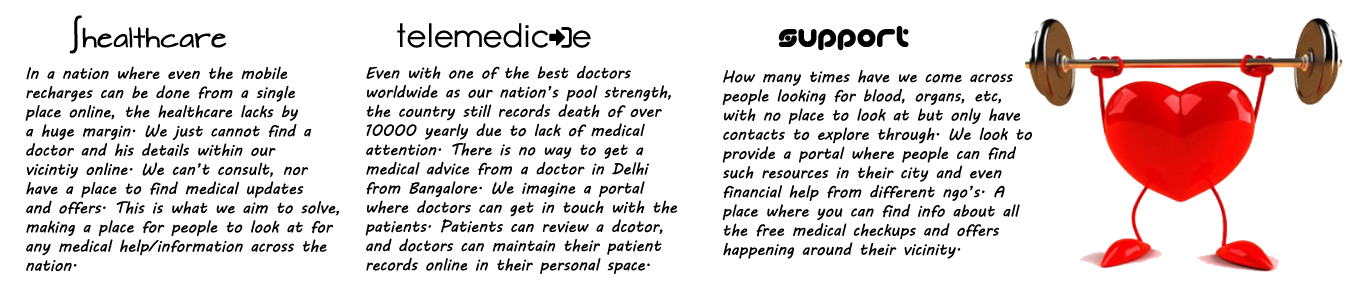
<style>
.page{position:relative;width:1349px;height:305px;background:#ffffff}
.page>*{position:absolute;margin:0}
.t1{font:24px "ArchitectsDaughter";color:#000000}
.t2{font:40px "MyriadPro-Regular";color:#000000}
.t3{font:32px "LigatureSymbols";color:#000000}
.t4{font:24px "TechniqueBRK";color:#000000}
.t5{font:16px "MVBoli";color:#000000}
</style>
<div class="page">
<p class="t1" style="left:69px;top:15px;width:158px;height:39px"><span class="t2">∫</span>healthcare</p>
<p class="t3" style="left:397px;top:23px;width:194px;height:25px">telemedicine</p>
<p class="t4" style="left:778px;top:26px;width:131px;height:25px">support</p>
<p class="t5" style="left:365px;top:65px;width:312px;height:209px">Even with one of the best doctors <br>worldwide as our nation’s pool strength,<br>the country still records death of over<br>10000 yearly due to lack of medical<br>attention. There is no way to get a<br>medical advice from a doctor in Delhi<br>from Bangalore. We imagine a portal<br>where doctors can get in touch with the<br>patients. Patients can review a dcotor,<br>and doctors can maintain their patient<br>records online in their personal space.</p>
<p class="t5" style="left:25px;top:66px;width:314px;height:206px">In a nation where even the mobile<br>recharges can be done from a single<br>place online, the healthcare lacks by <br>a huge margin. We just cannot find a<br>doctor and his details within our<br>vicintiy online. We can’t consult, nor<br>have a place to find medical updates<br>and offers. This is what we aim to solve,<br>making a place for people to look at for<br>any medical help/information across the <br>nation.</p>
<p class="t5" style="left:722px;top:70px;width:310px;height:189px">How many times have we come across<br>people looking for blood, organs, etc,<br>with no place to look at but only have<br>contacts to explore through. We look to<br>provide a portal where people can find <br>such resources in their city and even <br>financial help from different ngo’s. A<br>place where you can find info about all<br>the free medical checkups and offers<br>happening around their vicinity.</p>
</div>
